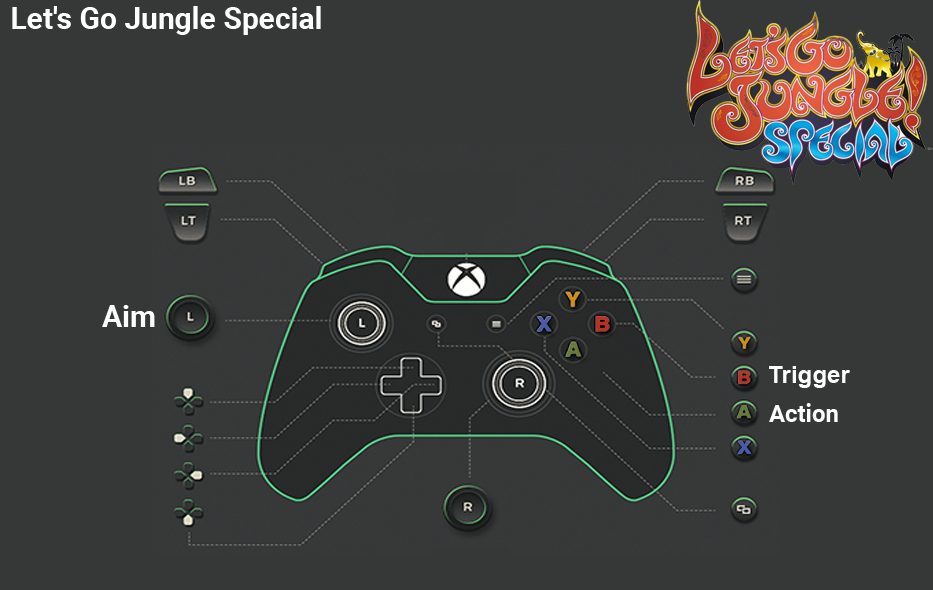
<style>
.page{position:relative;width:933px;height:590px;background:#363838}
.page>*{position:absolute;margin:0}
.t1{font:30px "Roboto-Bold";color:#ffffff}
.t2{font:30px "Roboto-Bold";color:#fefefe}
.t3{font:24px "Arial-BoldMT";color:#fefefe}
.t4{font:24px "Roboto-Bold";color:#ffffff}
</style>
<div class="page">
<p class="t1" style="left:12px;top:6px;width:309px;height:29px">Let's Go Jungle Special</p>
<p class="t2" style="left:102px;top:305px;width:53px;height:22px">Aim</p>
<p class="t3" style="left:769px;top:366px;width:81px;height:22px">Trigger</p>
<p class="t4" style="left:769px;top:403px;width:69px;height:19px">Action</p>
</div>
